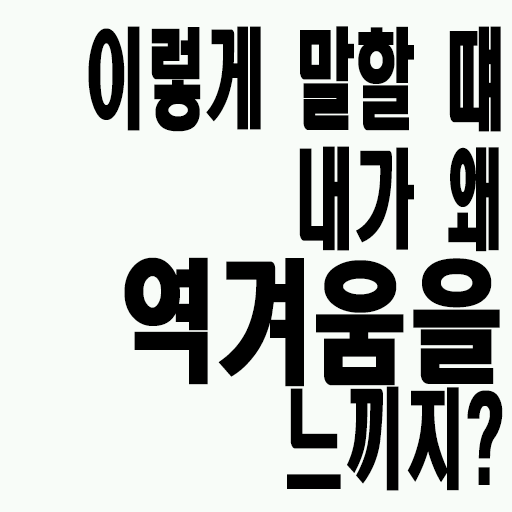
<style>
.page{position:relative;width:512px;height:512px;background:#f8fcf8}
.page>*{position:absolute;margin:0}
.t1{font:108px/120px "HeadlineR-HM";color:#000000;scale:0.56 1}
.t2{font:133.2px/120px "HeadlineR-HM";color:#000000;scale:0.72 1}
</style>
<div class="page">
<p class="t1" style="left:88px;top:26px;width:415px;height:465px;text-align:right">이렇게 말할 떄<br>내가 왜<br><span class="t2">역겨움을<br></span>느끼지?</p>
</div>
